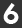
<style>
.page{position:relative;width:22px;height:28px;background:#333333}
.page>*{position:absolute;margin:0}
.t1{font:30px "ProductSans-Bold";color:#ffffff}
</style>
<div class="page">
<p class="t1" style="left:3px;top:3px;width:16px;height:21px">6</p>
</div>
